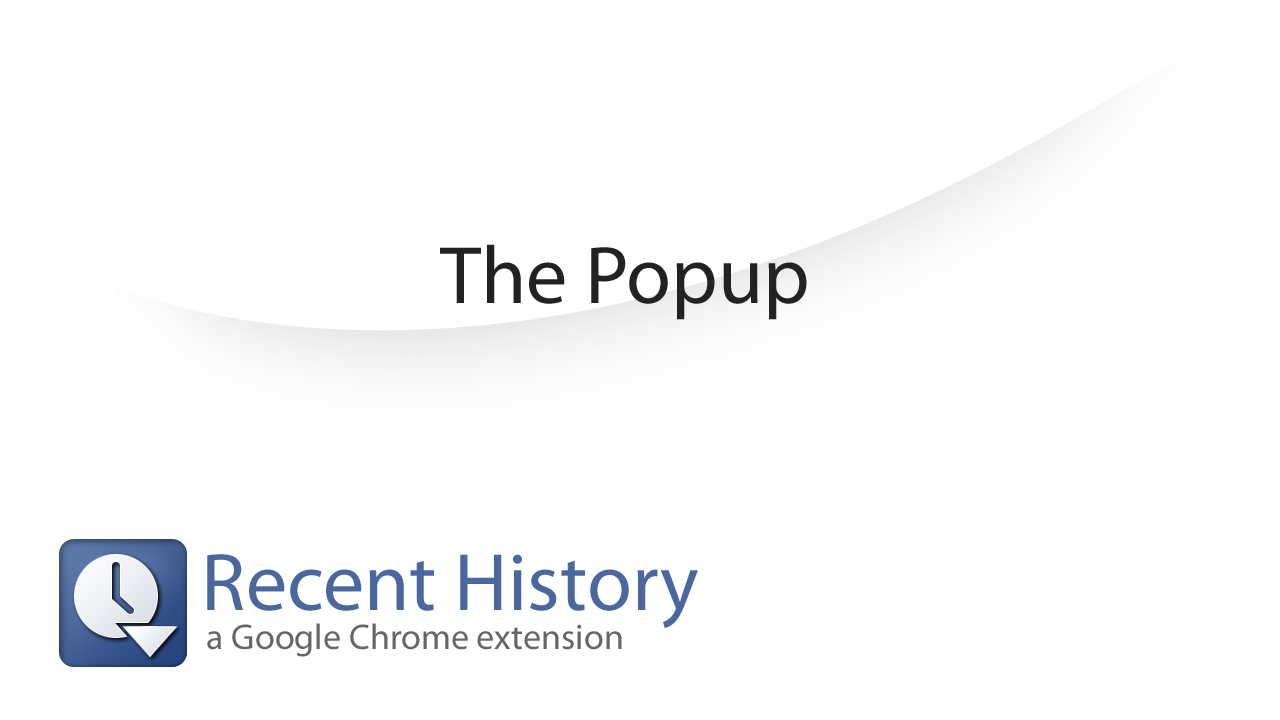
<style>
.page{position:relative;width:1280px;height:720px;background:#ffffff}
.page>*{position:absolute;margin:0}
.t1{font:82px "MyriadPro-Regular";color:#222222}
.t2{font:82px "MyriadPro-Regular";color:#4a689e}
.t3{font:36px "MyriadPro-Regular";color:#666666}
</style>
<div class="page">
<p class="t1" style="left:440px;top:244px;width:367px;height:76px">The Popup</p>
<p class="t2" style="left:207px;top:554px;width:491px;height:74px">Recent History</p>
<p class="t3" style="left:207px;top:623px;width:415px;height:34px">a Google Chrome extension</p>
</div>
